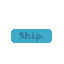
<style>
.page{position:relative;width:64px;height:64px;background:#ffffff}
.page>*{position:absolute;margin:0}
.t1{font:10px "Superscript";color:#3281a2}
</style>
<div class="page">
<p class="t1" style="left:19px;top:32px;width:24px;height:9px">Skip</p>
</div>
